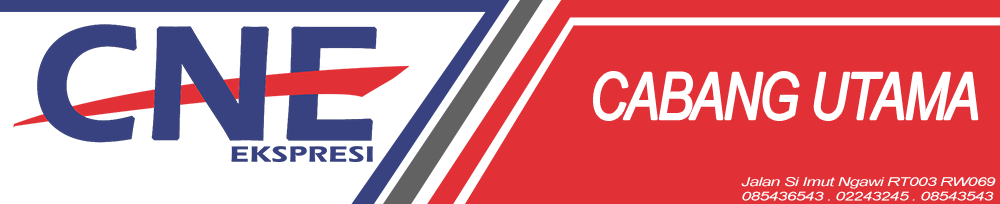
<style>
.page{position:relative;width:1000px;height:204px;background:#e13036}
.page>*{position:absolute;margin:0}
.t1{font:65px "Arial-ItalicMT";letter-spacing:-0.04em;color:#ffffff;scale:0.8 1}
.t2{font:12.2px "Arial-ItalicMT";letter-spacing:-0.04em;color:#ffffff;scale:1.44 1}
</style>
<div class="page">
<p class="t1" style="left:594px;top:72px;width:384px;height:48px">CABANG UTAMA</p>
<p class="t2" style="left:741px;top:177px;width:255px;height:24px">Jalan Si Imut Ngawi RT003 RW069<br>085436543 . 02243245 . 08543543</p>
</div>
